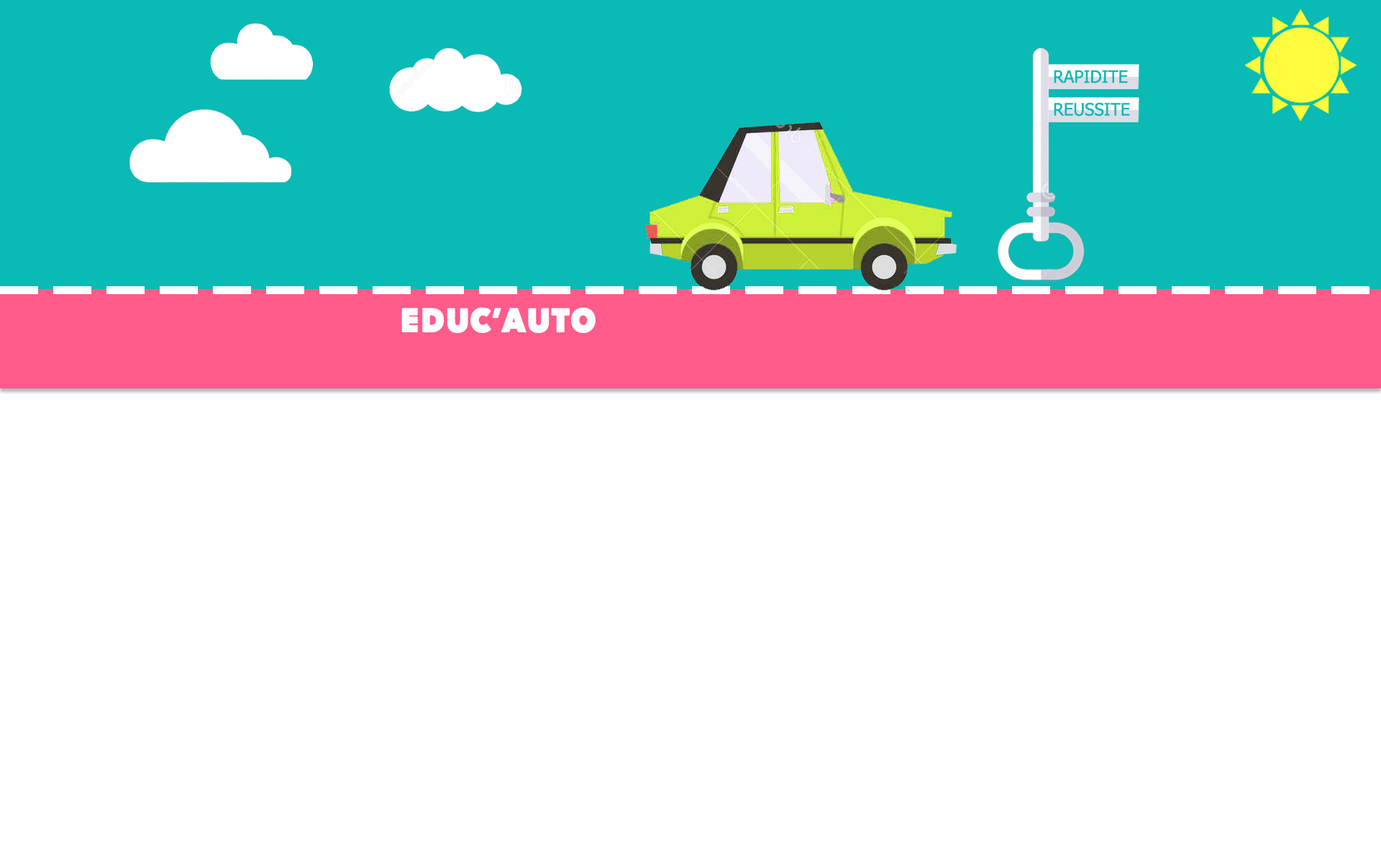
<style>
.page{position:relative;width:1381px;height:863px;background:#ffffff}
.page>*{position:absolute;margin:0}
.t1{font:34.5px "HereJustNow-Black";color:#ffffff}
</style>
<div class="page">
<p class="t1" style="left:401px;top:307px;width:195px;height:27px">EDUC'AUTO</p>
</div>
